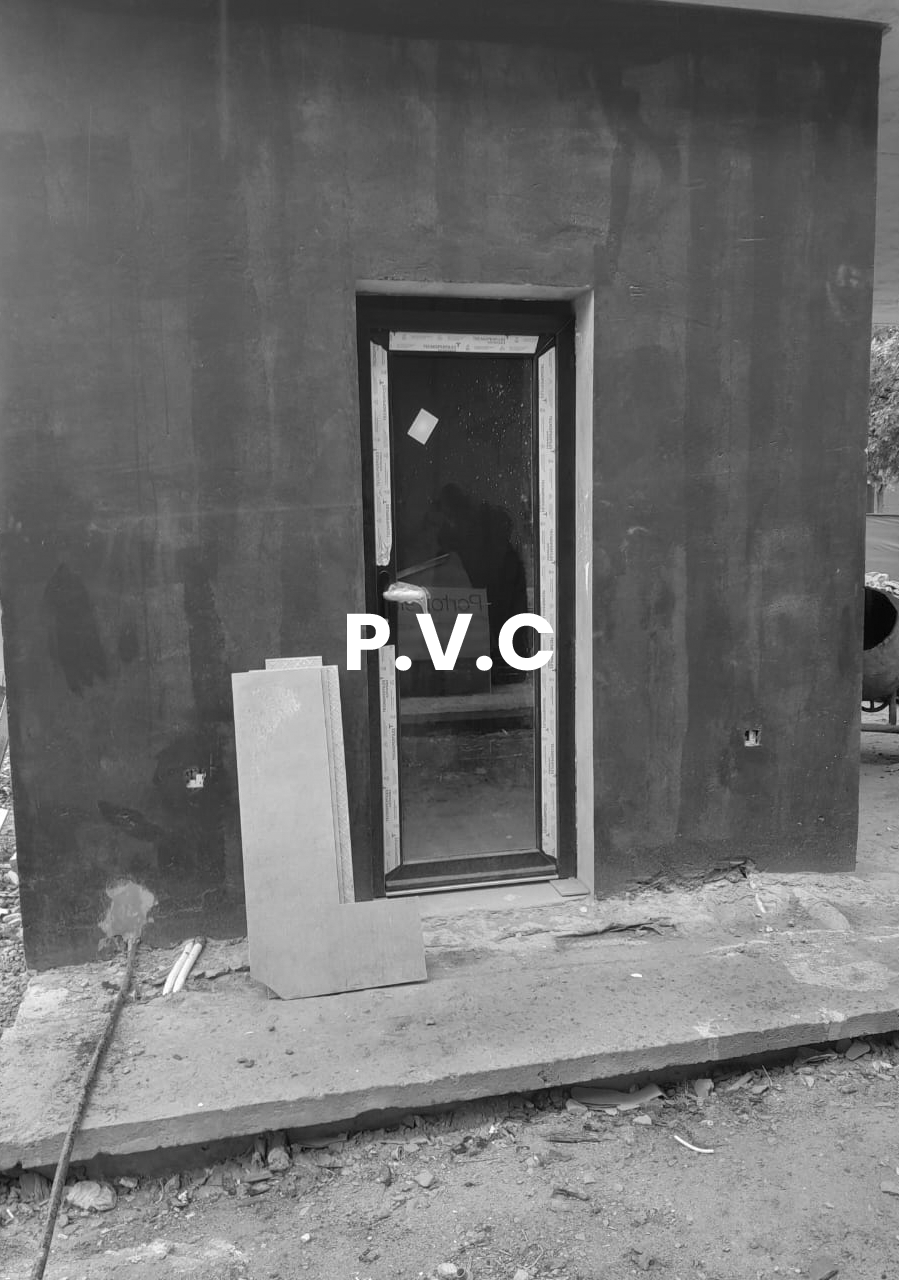
<style>
.page{position:relative;width:899px;height:1280px}
.page>*{position:absolute;margin:0}
.t1{font:80px "Poppins-Bold";color:#ffffff}
</style>
<div class="page">
<p class="t1" style="left:347px;top:613px;width:207px;height:58px">P.V.C</p>
</div>
